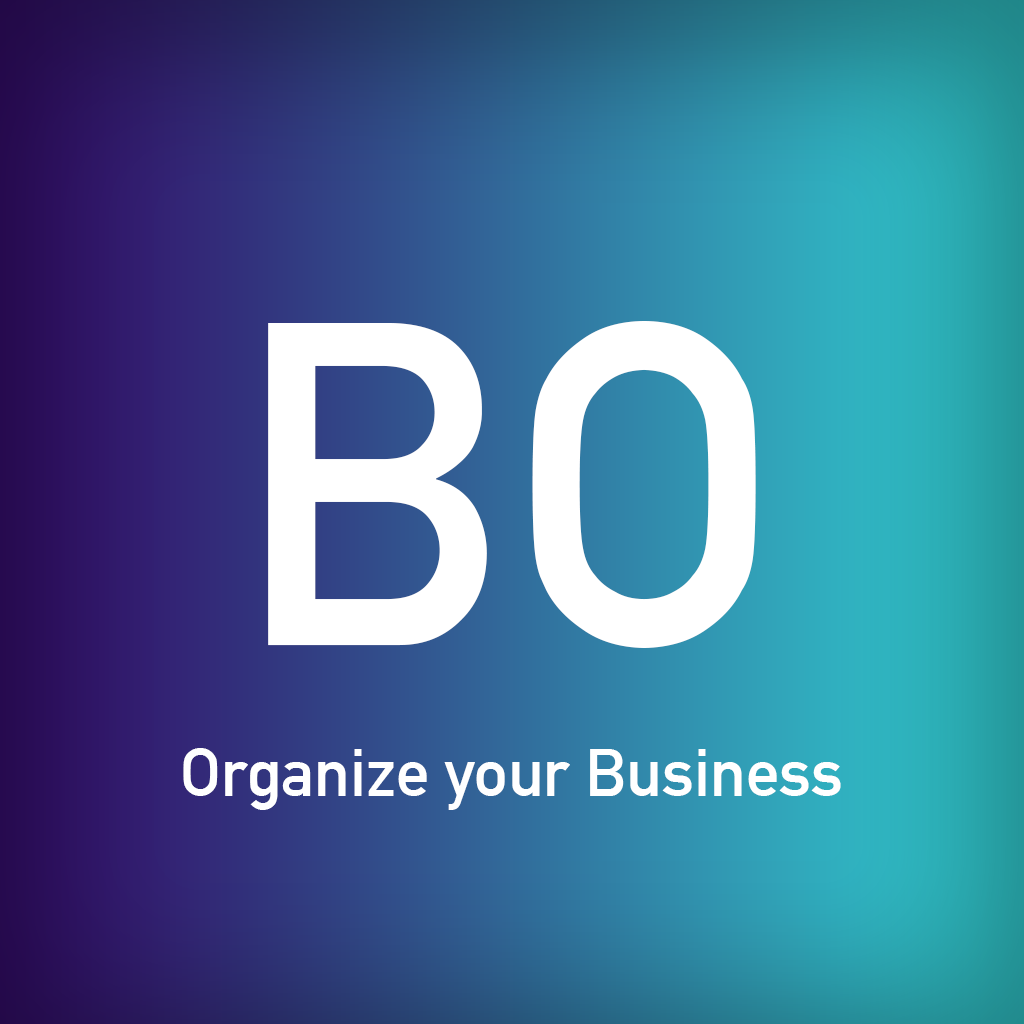
<style>
.page{position:relative;width:1024px;height:1024px}
.page>*{position:absolute;margin:0}
.t1{font:451.8px "DINAlternate-Bold";color:#ffffff}
.t2{font:66.7px "DINAlternate-Bold";color:#ffffff}
</style>
<div class="page">
<p class="t1" style="left:268px;top:321px;width:488px;height:327px">BO</p>
<p class="t2" style="left:183px;top:748px;width:658px;height:62px">Organize your Business</p>
</div>
